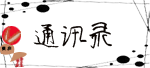
<style>
.page{position:relative;width:150px;height:68px;background:#ffffff}
.page>*{position:absolute;margin:0}
.t1{font:27px "Ò¶¸ùÓÑ·ÇÖ÷Á÷ÊÖÐ´";color:#0a0401}
</style>
<div class="page">
<p class="t1" style="left:33px;top:22px;width:79px;height:27px">通讯录</p>
</div>
